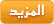
<style>
.page{position:relative;width:54px;height:24px}
.page>*{position:absolute;margin:0}
.t1{font:16px "BEsfehanBold";color:#ffffff;text-transform:uppercase}
</style>
<div class="page">
<p class="t1" style="left:9px;top:4px;width:35px;height:14px">المزيد</p>
</div>
